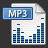
<style>
.page{position:relative;width:48px;height:48px;background:#333333}
.page>*{position:absolute;margin:0}
.t1{font:10px "MyriadWebPro";color:#ffffff;text-transform:uppercase}
</style>
<div class="page">
<p class="t1" style="left:8px;top:9px;width:19px;height:8px">MP3</p>
</div>
